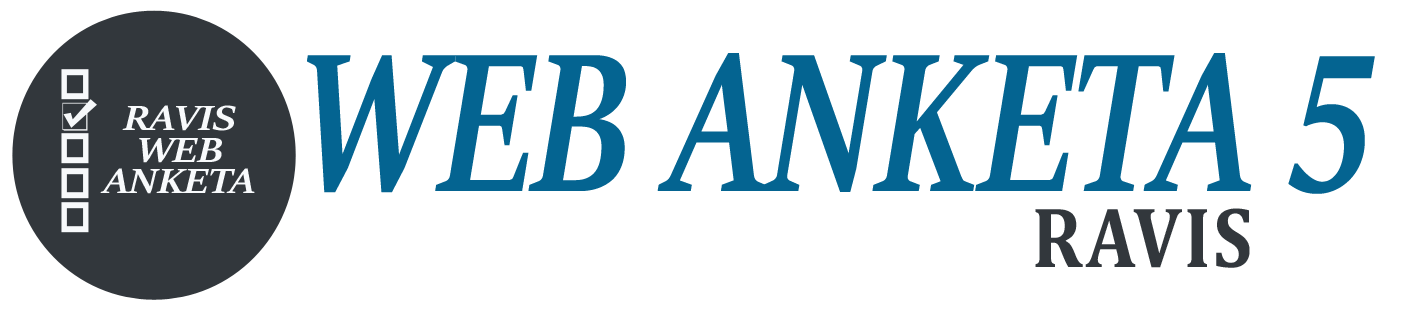
<style>
.page{position:relative;width:1401px;height:316px;background:#ffffff}
.page>*{position:absolute;margin:0}
.t1{font:221.9px "SitkaBanner-BoldItalic";letter-spacing:0.015em;color:#046491;scale:0.75 1}
.t2{font:39.3px "SitkaBanner-BoldItalic";letter-spacing:0.015em;color:#f8fafc;scale:1.09 1}
.t3{font:86.4px "Cambria-Bold";letter-spacing:0.05em;color:#32373c;scale:0.89 1}
</style>
<div class="page">
<p class="t1" style="left:307px;top:53px;width:1068px;height:141px">WEB ANKETA 5</p>
<p class="t2" style="left:100px;top:105px;width:155px;height:89px;text-align:center">RAVIS <br>WEB<br>ANKETA</p>
<p class="t3" style="left:1035px;top:208px;width:215px;height:60px">RAVIS</p>
</div>
